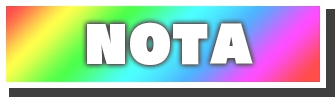
<style>
.page{position:relative;width:336px;height:98px}
.page>*{position:absolute;margin:0}
.t1{font:48px "RaglanPunchStd-UB";letter-spacing:0.046em;color:#ffffff}
</style>
<div class="page">
<p class="t1" style="left:87px;top:22px;width:166px;height:43px">NOTA</p>
</div>
